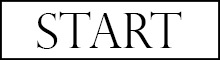
<style>
.page{position:relative;width:220px;height:60px;background:#ffffff}
.page>*{position:absolute;margin:0}
.t1{font:48px "PerpetuaTitlingMT-Light";color:#000000}
</style>
<div class="page">
<p class="t1" style="left:37px;top:11px;width:145px;height:38px">START</p>
</div>
